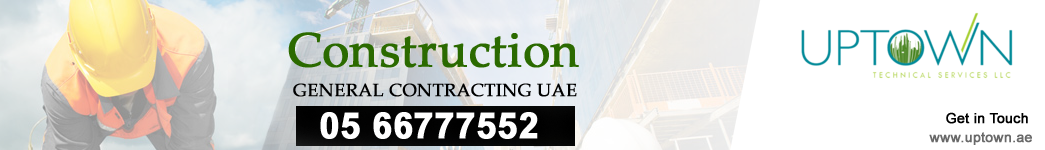
<style>
.page{position:relative;width:1045px;height:150px;background:#ffffff}
.page>*{position:absolute;margin:0}
.t1{font:48px "PalatinoLinotype-Roman";color:#2b6a00;font-weight:bold}
.t2{font:18px "PalatinoLinotype-Roman";color:#000000;font-weight:bold}
.t3{font:36px "Arial-BoldMT";color:#ffffff;font-weight:bold}
.t4{font:14px "ArialMT";color:#000000;font-weight:bold}
.t5{font:14px "ArialMT";color:#696969;font-weight:bold}
</style>
<div class="page">
<p class="t1" style="left:288px;top:32px;width:291px;height:36px">Construction</p>
<p class="t2" style="left:293px;top:83px;width:284px;height:14px">GENERAL CONTRACTING UAE</p>
<p class="t3" style="left:320px;top:112px;width:218px;height:27px">05 66777552</p>
<p class="t4" style="left:946px;top:112px;width:82px;height:12px">Get in Touch</p>
<p class="t5" style="left:929px;top:132px;width:103px;height:13px">www.uptown.ae</p>
</div>
